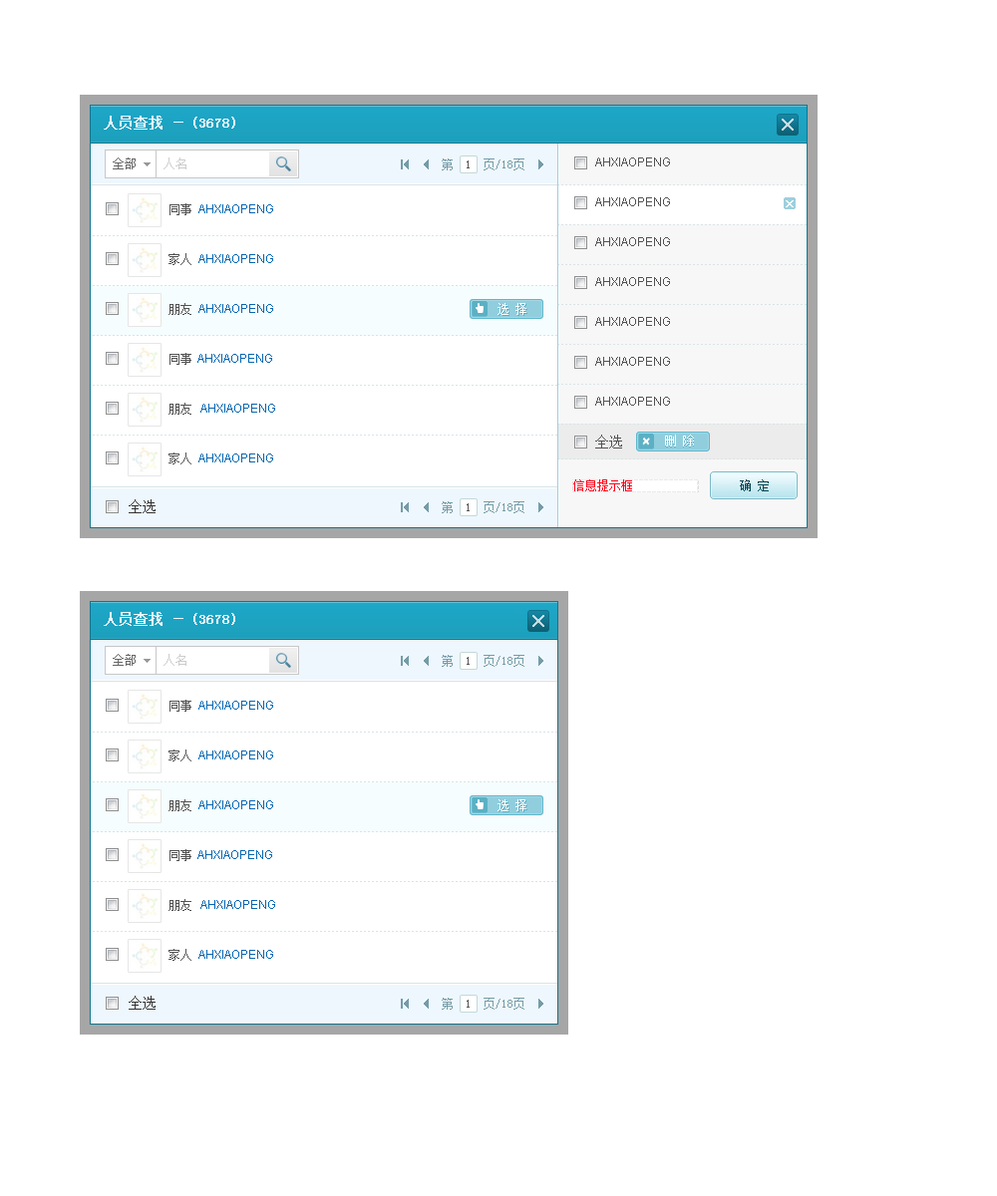
<style>
.page{position:relative;width:997px;height:1196px;background:#ffffff}
.page>*{position:absolute;margin:0}
.t1{font:14px "SimSun";color:#eef7fe;font-weight:bold}
.t2{font:12px "ArialMT";color:#525252}
.t3{font:12px "ArialMT";color:#0666b0}
.t4{font:12px "SimSun";color:#525252}
.t5{font:14px "SimSun";color:#525252}
.t6{font:14px "SimSun";color:#333333}
</style>
<div class="page">
<p class="t1" style="left:104px;top:116px;width:79px;height:14px">人员查找 －</p>
<p class="t1" style="left:193px;top:117px;width:42px;height:12px">(3678)</p>
<p class="t2" style="left:595px;top:158px;width:75px;height:8px">AHXIAOPENG</p>
<p class="t2" style="left:595px;top:197px;width:75px;height:9px">AHXIAOPENG</p>
<p class="t3" style="left:169px;top:203px;width:104px;height:12px"><span class="t4">同事 </span>AHXIAOPENG</p>
<p class="t2" style="left:595px;top:237px;width:75px;height:9px">AHXIAOPENG</p>
<p class="t3" style="left:168px;top:253px;width:105px;height:12px"><span class="t4">家人 </span>AHXIAOPENG</p>
<p class="t2" style="left:595px;top:277px;width:75px;height:9px">AHXIAOPENG</p>
<p class="t3" style="left:168px;top:303px;width:105px;height:12px"><span class="t4">朋友 </span>AHXIAOPENG</p>
<p class="t2" style="left:595px;top:317px;width:75px;height:9px">AHXIAOPENG</p>
<p class="t3" style="left:169px;top:353px;width:103px;height:12px"><span class="t4">同事  </span>AHXIAOPENG</p>
<p class="t2" style="left:595px;top:357px;width:75px;height:9px">AHXIAOPENG</p>
<p class="t2" style="left:595px;top:397px;width:75px;height:9px">AHXIAOPENG</p>
<p class="t3" style="left:168px;top:403px;width:107px;height:12px"><span class="t4">朋友  </span>AHXIAOPENG</p>
<p class="t5" style="left:595px;top:435px;width:27px;height:14px">全选</p>
<p class="t3" style="left:168px;top:453px;width:105px;height:12px"><span class="t4">家人 </span>AHXIAOPENG</p>
<p class="t6" style="left:129px;top:499px;width:27px;height:14px">全选</p>
<p class="t1" style="left:104px;top:612px;width:79px;height:14px">人员查找 －</p>
<p class="t1" style="left:193px;top:613px;width:42px;height:12px">(3678)</p>
<p class="t3" style="left:169px;top:700px;width:104px;height:12px"><span class="t4">同事 </span>AHXIAOPENG</p>
<p class="t3" style="left:168px;top:750px;width:105px;height:12px"><span class="t4">家人 </span>AHXIAOPENG</p>
<p class="t3" style="left:168px;top:799px;width:105px;height:12px"><span class="t4">朋友 </span>AHXIAOPENG</p>
<p class="t3" style="left:169px;top:849px;width:103px;height:12px"><span class="t4">同事  </span>AHXIAOPENG</p>
<p class="t3" style="left:168px;top:899px;width:107px;height:12px"><span class="t4">朋友  </span>AHXIAOPENG</p>
<p class="t3" style="left:168px;top:949px;width:105px;height:12px"><span class="t4">家人 </span>AHXIAOPENG</p>
<p class="t6" style="left:129px;top:996px;width:27px;height:14px">全选</p>
</div>
